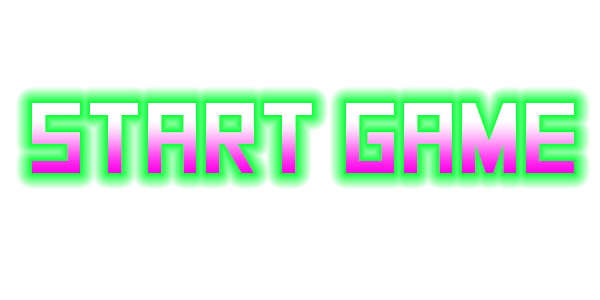
<style>
.page{position:relative;width:600px;height:300px;background:#ffffff}
.page>*{position:absolute;margin:0}
.t1{font:100px "SquareFont"}
</style>
<div class="page">
<p class="t1" style="left:32px;top:103px;width:542px;height:70px">Start Game</p>
</div>
